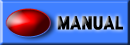
<style>
.page{position:relative;width:130px;height:45px;background:#4080ff}
.page>*{position:absolute;margin:0}
.t1{font:18px "GothicXB-HM"}
</style>
<div class="page">
<p class="t1" style="left:57px;top:16px;width:66px;height:14px">MANUAL</p>
</div>
